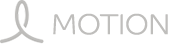
<style>
.page{position:relative;width:169px;height:44px;background:#ffffff}
.page>*{position:absolute;margin:0}
.t1{font:29px "CoHeadlineW23-ArabicLight";color:#bfbebc}
</style>
<div class="page">
<p class="t1" style="left:53px;top:13px;width:115px;height:22px">MOTION</p>
</div>
